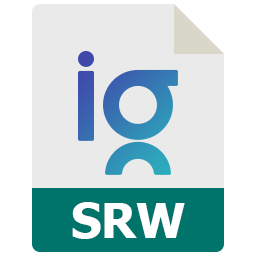
<style>
.page{position:relative;width:256px;height:256px;background:#eaeaea}
.page>*{position:absolute;margin:0}
.t1{font:48px "Tahoma-Bold";color:#ffffff}
</style>
<div class="page">
<p class="t1" style="left:72px;top:202px;width:113px;height:37px">SRW</p>
</div>
